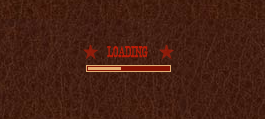
<style>
.page{position:relative;width:265px;height:119px}
.page>*{position:absolute;margin:0}
.t1{font:14px "Nashville";letter-spacing:-0.01em;color:#ba1c07;text-transform:uppercase}
</style>
<div class="page">
<p class="t1" style="left:107px;top:46px;width:41px;height:12px">loading</p>
</div>
